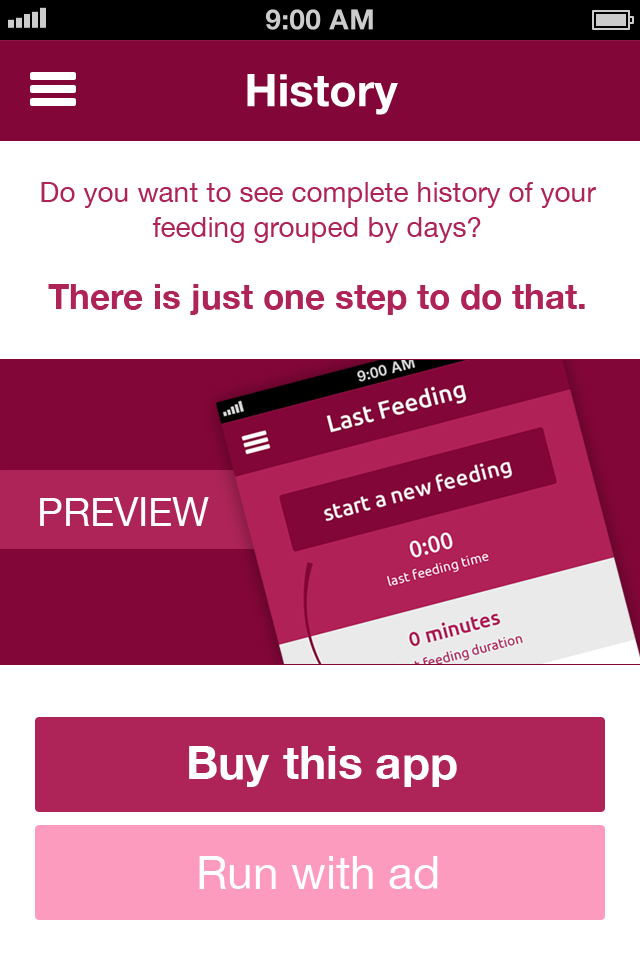
<style>
.page{position:relative;width:640px;height:960px;background:#ffffff}
.page>*{position:absolute;margin:0}
.t1{font:45px "HelveticaNeue-Bold";color:#ffffff}
.t2{font:28px/35px "HelveticaNeue";color:#ae2458}
.t3{font:35px "HelveticaNeue-Bold";color:#ae2458}
.t4{font:40px "HelveticaNeue";color:#ffffff;text-transform:uppercase}
.t5{font:46px "HelveticaNeue-Bold";color:#ffffff}
.t6{font:46px "HelveticaNeue";color:#ffffff}
</style>
<div class="page">
<p class="t1" style="left:247px;top:74px;width:151px;height:41px">History</p>
<p class="t2" style="left:41px;top:182px;width:555px;height:133px;text-align:center">Do you want to see complete history of your feeding grouped by days? <br> <br><span class="t3">There is just one step to do that.</span></p>
<p class="t4" style="left:40px;top:497px;width:169px;height:29px">Preview</p>
<p class="t5" style="left:189px;top:746px;width:268px;height:41px">Buy this app</p>
<p class="t6" style="left:199px;top:856px;width:239px;height:33px">Run with ad</p>
</div>
